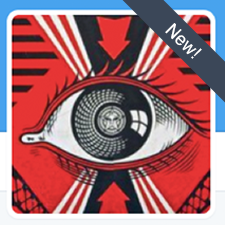
<style>
.page{position:relative;width:225px;height:225px}
.page>*{position:absolute;margin:0}
.t1{font:18px "Helvetica";color:#ffffff}
</style>
<div class="page">
<p class="t1" style="left:165px;top:23px;width:37px;height:36px;rotate:45deg">New!</p>
</div>
